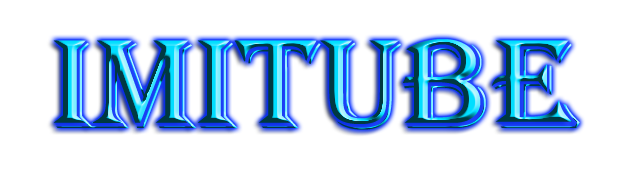
<style>
.page{position:relative;width:631px;height:181px;background:#ffffff}
.page>*{position:absolute;margin:0}
.t1{font:131.2px "Algerian";scale:1.06 1}
</style>
<div class="page">
<p class="t1" style="left:53px;top:39px;width:527px;height:91px">imitube</p>
</div>
